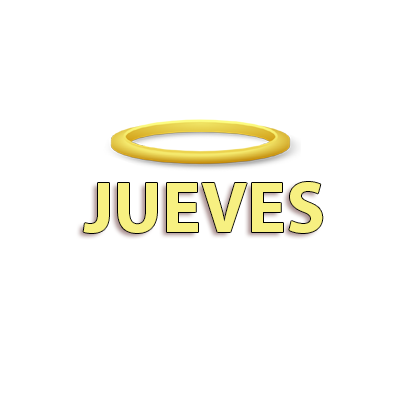
<style>
.page{position:relative;width:400px;height:400px;background:#ffffff}
.page>*{position:absolute;margin:0}
.t1{font:72px "MyriadPro-Bold";color:#f7f081}
</style>
<div class="page">
<p class="t1" style="left:83px;top:182px;width:240px;height:51px">JUEVES</p>
</div>
